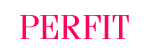
<style>
.page{position:relative;width:153px;height:52px;background:#ffffff}
.page>*{position:absolute;margin:0}
.t1{font:36px "FerraraOsf";color:#fe0060}
</style>
<div class="page">
<p class="t1" style="left:20px;top:15px;width:109px;height:24px">PERFIT</p>
</div>
